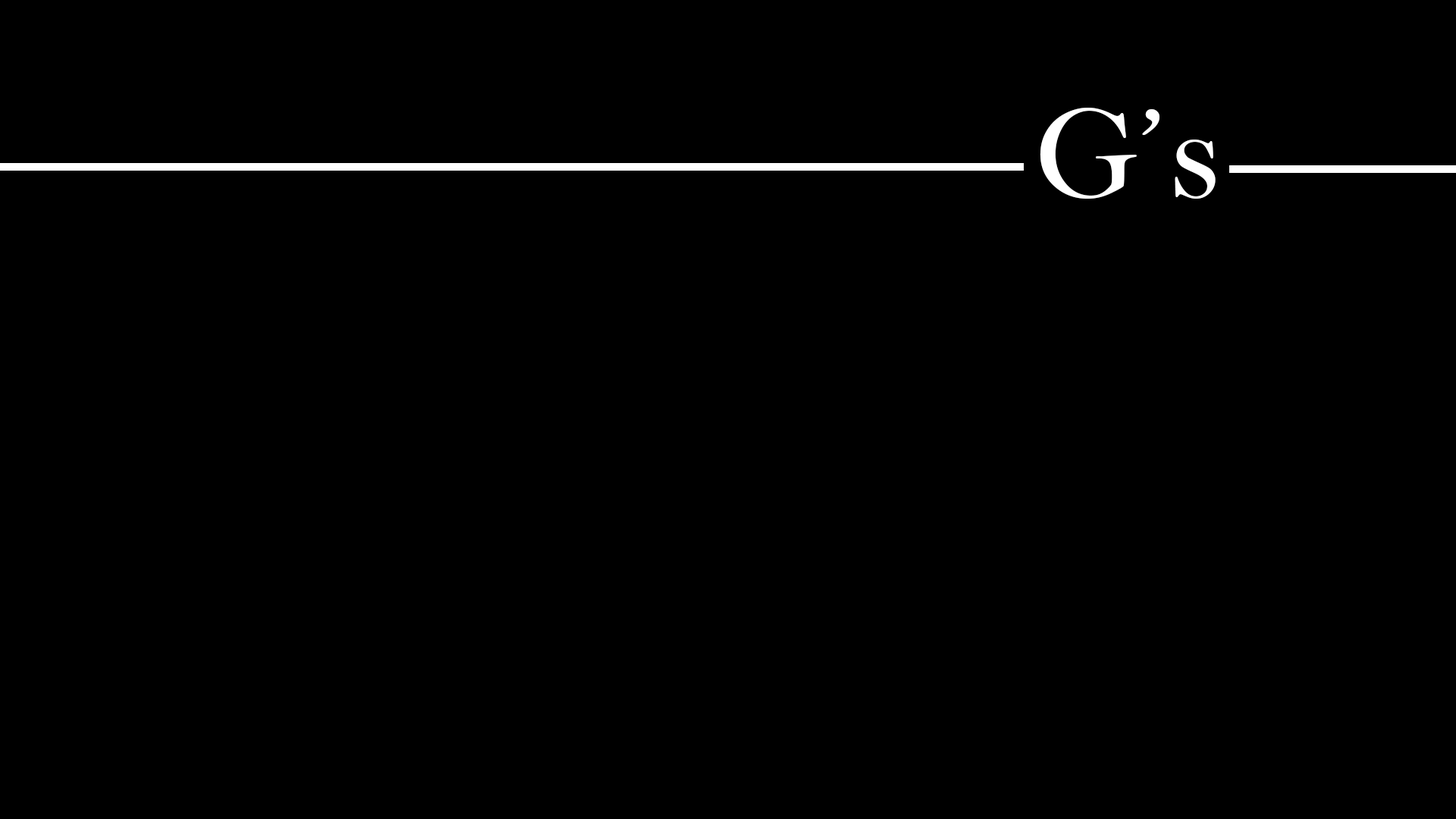
<style>
.page{position:relative;width:1456px;height:819px;background:#000000}
.page>*{position:absolute;margin:0}
.t1{font:136.5px "BellMT";color:#ffffff}
</style>
<div class="page">
<p class="t1" style="left:1040px;top:108px;width:176px;height:91px">G’s</p>
</div>
